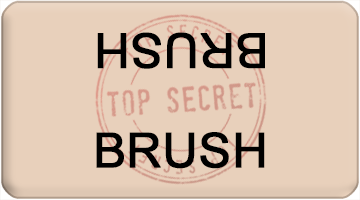
<style>
.page{position:relative;width:360px;height:200px;background:#e8d0bb}
.page>*{position:absolute;margin:0}
.t1{font:48px "ArialMT";color:#000000;font-weight:bold}
</style>
<div class="page">
<p class="t1" style="left:97px;top:32px;width:168px;height:37px;rotate:180deg">BRUSH</p>
<p class="t1" style="left:96px;top:132px;width:169px;height:37px">BRUSH</p>
</div>
